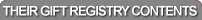
<style>
.page{position:relative;width:202px;height:20px;background:#858585}
.page>*{position:absolute;margin:0}
.t1{font:13.3px "Arial-BoldMT";letter-spacing:-0.075em;color:#ffffff}
</style>
<div class="page">
<p class="t1" style="left:3px;top:5px;width:194px;height:11px">THEIR GIFT REGISTRY CONTENTS</p>
</div>
